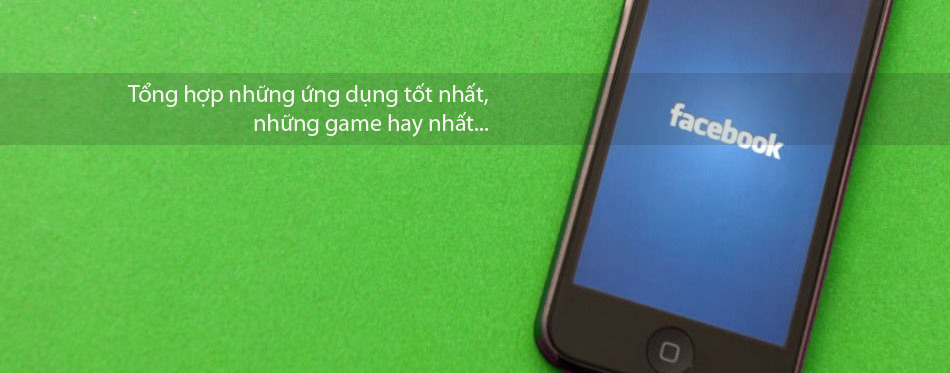
<style>
.page{position:relative;width:950px;height:373px}
.page>*{position:absolute;margin:0}
.t1{font:24px "MyriadPro-Regular";color:#f4f2ec}
</style>
<div class="page">
<p class="t1" style="left:127px;top:82px;width:362px;height:55px;text-align:right">Tổng hợp những ứng dụng tốt nhất, những game hay nhất...</p>
</div>
